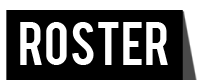
<style>
.page{position:relative;width:200px;height:80px;background:#000000}
.page>*{position:absolute;margin:0}
.t1{font:48px "Bebas";color:#ffffff}
</style>
<div class="page">
<p class="t1" style="left:20px;top:22px;width:148px;height:43px">ROSTER</p>
</div>
